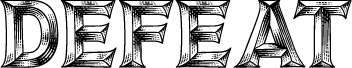
<style>
.page{position:relative;width:352px;height:68px;background:#ffffff}
.page>*{position:absolute;margin:0}
.t1{font:97px "BiteHard";color:#000000;scale:1.03 1}
</style>
<div class="page">
<p class="t1" style="left:0px;top:0px;width:352px;height:68px">Defeat</p>
</div>
